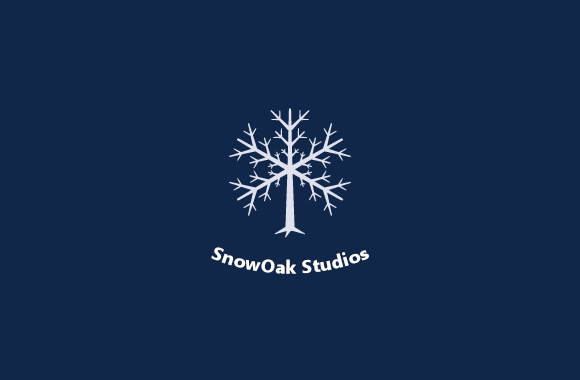
<style>
.page{position:relative;width:580px;height:380px;background:#11274a}
.page>*{position:absolute;margin:0}
.t1{font:18px "Gadugi-Bold";color:#ffffff}
</style>
<div class="page">
<p class="t1" style="left:211px;top:247px;width:158px;height:27px">SnowOak Studios</p>
</div>
